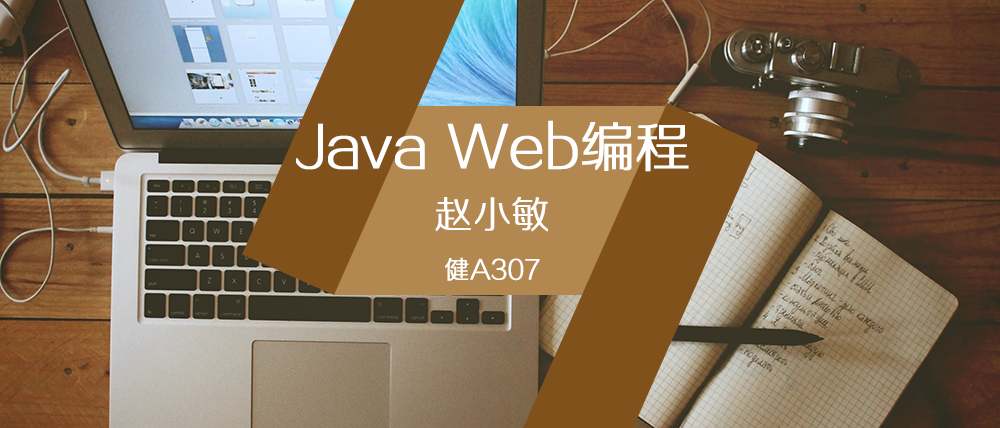
<style>
.page{position:relative;width:1000px;height:428px}
.page>*{position:absolute;margin:0}
.t1{font:54.1px "FZZXHJW--GB1-0";color:#ffffff;font-weight:bold}
.t2{font:37.5px "FZZXHJW--GB1-0";color:#ffffff;font-weight:bold}
.t3{font:25px "FZZXHJW--GB1-0";color:#ffffff;font-weight:bold}
</style>
<div class="page">
<p class="t1" style="left:296px;top:120px;width:393px;height:52px">Java Web编程</p>
<p class="t2" style="left:435px;top:197px;width:113px;height:35px">赵小敏</p>
<p class="t3" style="left:445px;top:257px;width:95px;height:24px">健A307</p>
</div>
